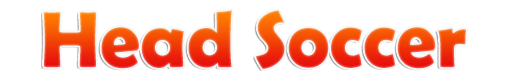
<style>
.page{position:relative;width:512px;height:83px;background:#ffffff}
.page>*{position:absolute;margin:0}
.t1{font:80px "BerlinSansFBDemi-Bold"}
</style>
<div class="page">
<p class="t1" style="left:44px;top:10px;width:422px;height:59px">Head Soccer</p>
</div>
